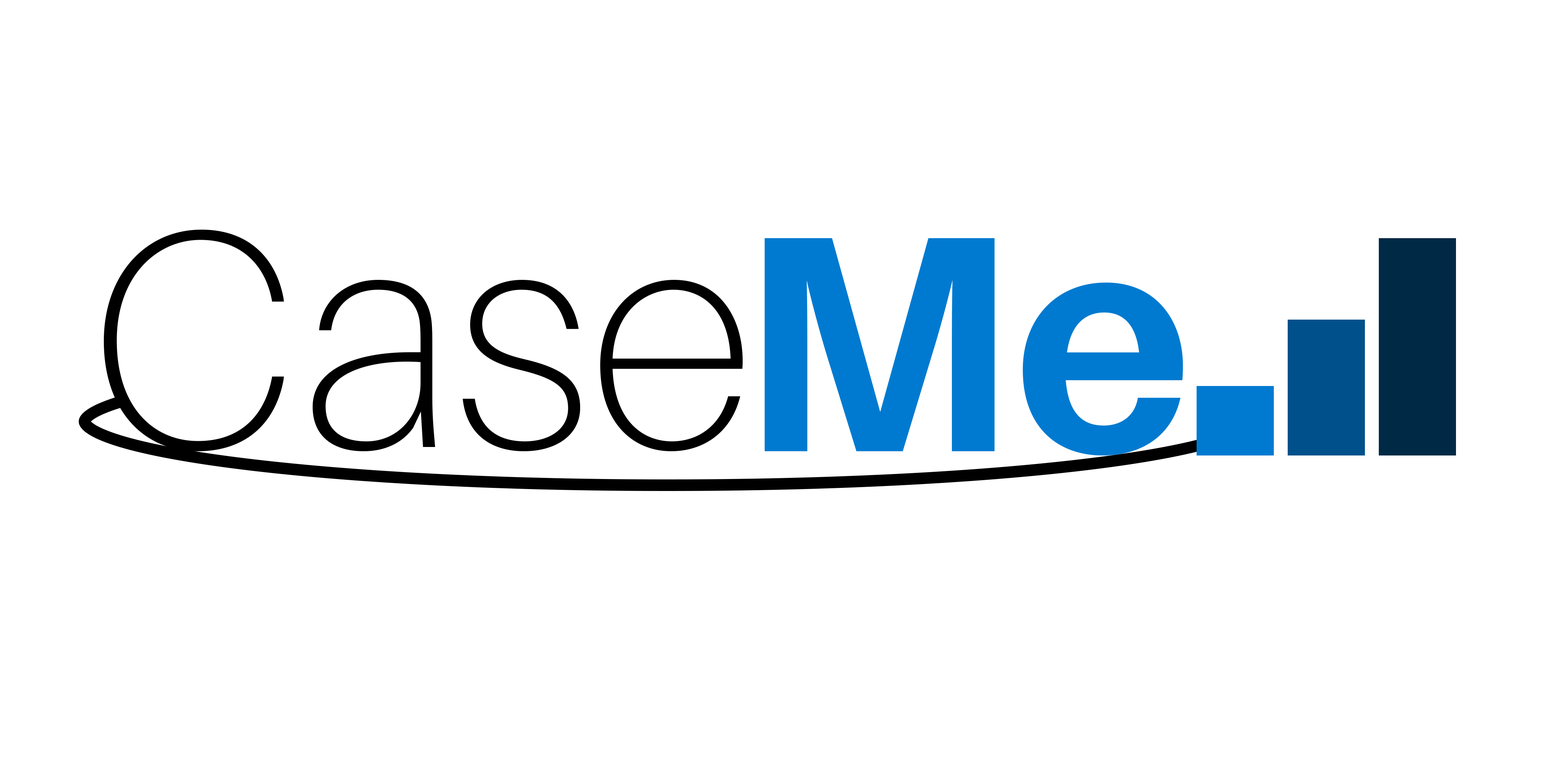
<style>
.page{position:relative;width:1544px;height:772px;background:#ffffff}
.page>*{position:absolute;margin:0}
.t1{font:308.9px "Aileron-Thin";color:#000000}
.t2{font:308.9px "Aileron-Bold";color:#007ad0}
</style>
<div class="page">
<p class="t1" style="left:104px;top:229px;width:639px;height:223px">Case</p>
<p class="t2" style="left:765px;top:238px;width:418px;height:218px">Me</p>
</div>
